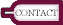
<style>
.page{position:relative;width:63px;height:25px;background:#6e0f3c}
.page>*{position:absolute;margin:0}
.t1{font:9px "Georgia";letter-spacing:0.004em}
</style>
<div class="page">
<p class="t1" style="left:15px;top:9px;width:43px;height:7px">CONTACT</p>
</div>
